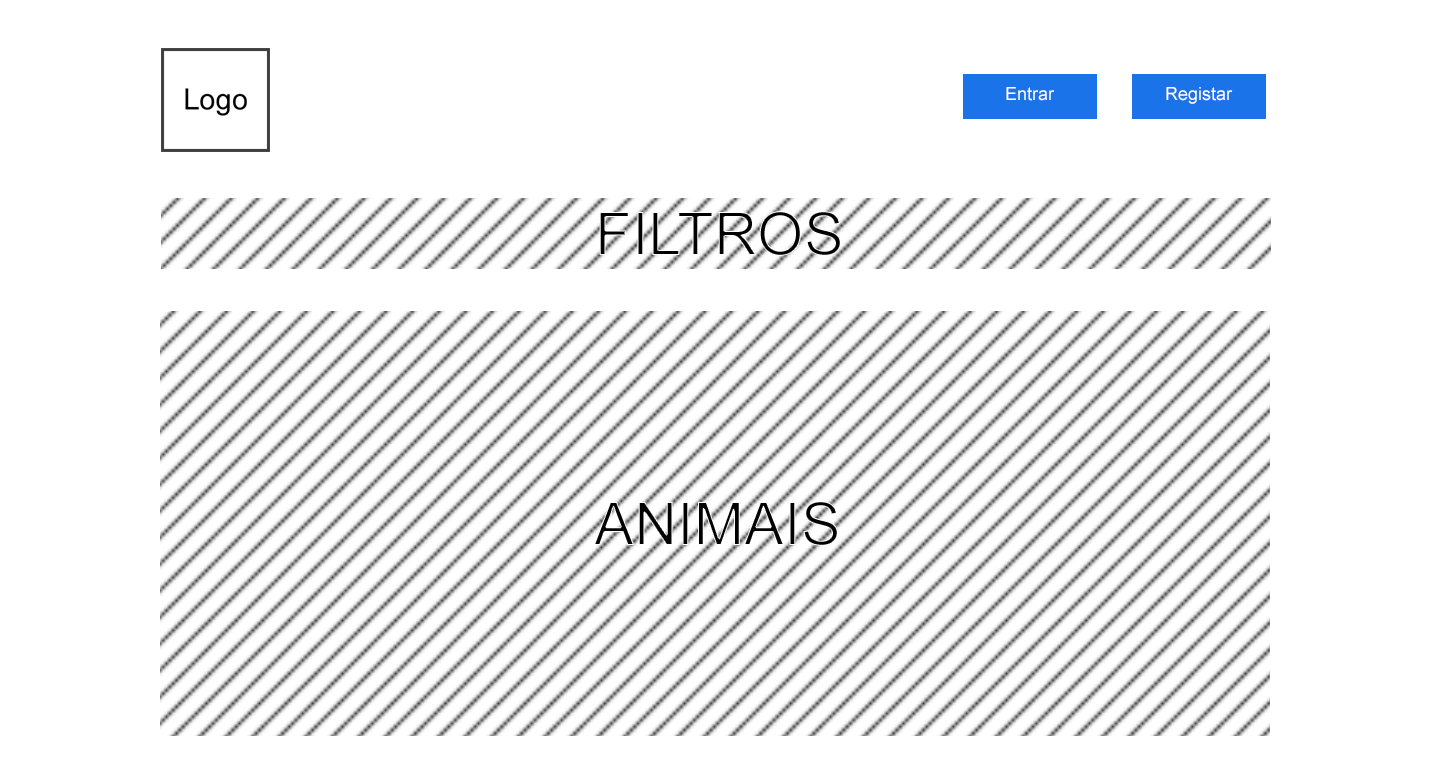
<style>
.page{position:relative;width:1431px;height:780px;background:#ffffff}
.page>*{position:absolute;margin:0}
.t1{font:18px "ArialMT";color:#ffffff}
.t2{font:60px "ArialMT"}
</style>
<div class="page">
<p class="t1" style="left:1006px;top:87px;width:49px;height:14px">Entrar</p>
<p class="t1" style="left:1166px;top:87px;width:67px;height:17px">Registar</p>
<p class="t2" style="left:599px;top:211px;width:242px;height:45px">FILTROS</p>
<p class="t2" style="left:594px;top:501px;width:244px;height:45px">ANIMAIS</p>
</div>
